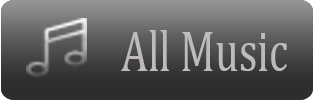
<style>
.page{position:relative;width:315px;height:100px}
.page>*{position:absolute;margin:0}
.t1{font:58.3px "Cambria";color:#bfbbbb;scale:0.73 1}
</style>
<div class="page">
<p class="t1" style="left:121px;top:30px;width:166px;height:41px">All Music</p>
</div>
